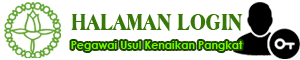
<style>
.page{position:relative;width:300px;height:60px;background:#ffffff}
.page>*{position:absolute;margin:0}
.t1{font:24px "AmericanaBT-ExtraBoldCondensed";color:#387808}
.t2{font:11px "CenturyGothic-Bold";color:#6dff00}
</style>
<div class="page">
<p class="t1" style="left:71px;top:14px;width:172px;height:17px">HALAMAN LOGIN</p>
<p class="t2" style="left:71px;top:41px;width:172px;height:10px">Pegawai Usul Kenaikan Pangkat</p>
</div>
